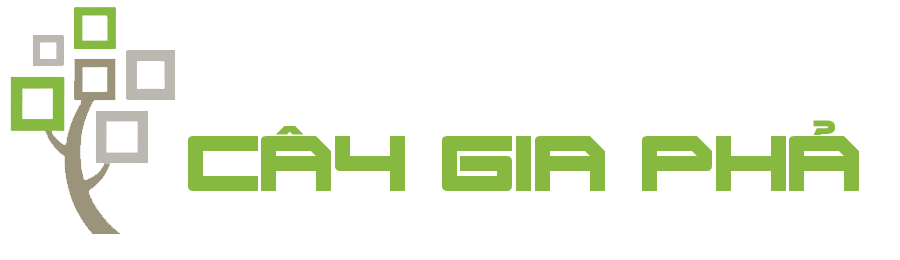
<style>
.page{position:relative;width:900px;height:260px;background:#ffffff}
.page>*{position:absolute;margin:0}
.t1{font:68.7px "UTM-NguyenHa-01";color:#87b940}
</style>
<div class="page">
<p class="t1" style="left:188px;top:120px;width:671px;height:71px">Cây Gia Phả</p>
</div>
